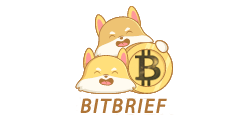
<style>
.page{position:relative;width:250px;height:123px;background:#ffffff}
.page>*{position:absolute;margin:0}
.t1{font:20px "MyriadPro-Regular";letter-spacing:0.05em;color:#af7537;text-transform:uppercase;font-weight:bold;font-style:italic}
</style>
<div class="page">
<p class="t1" style="left:80px;top:98px;width:87px;height:15px">bitBrief</p>
</div>
